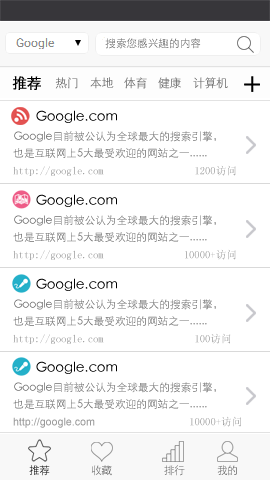
<style>
.page{position:relative;width:270px;height:480px;background:#ffffff}
.page>*{position:absolute;margin:0}
.t1{font:10.7px "STXihei";color:#676767}
.t2{font:14.7px "STXihei";letter-spacing:-0.04em;color:#000000;font-weight:bold}
.t3{font:12px "STXihei";letter-spacing:-0.04em;color:#676767}
.t4{font:12px "STXihei";letter-spacing:-0.04em}
.t5{font:13.3px "STXihei";color:#000000}
.t6{font:10.7px/16.9px "STXihei";color:#6e6e6e}
.t7{font:10.7px "SimSun";color:#9b9b9b}
.t8{font:10.7px "ArialMT";color:#9b9b9b}
.t9{font:10.7px "STXihei";letter-spacing:-0.04em}
.t10{font:10.7px "STXihei";letter-spacing:-0.04em;color:#676767}
</style>
<div class="page">
<p class="t1" style="left:105px;top:38px;width:96px;height:11px">搜索您感兴趣的内容</p>
<p class="t2" style="left:12px;top:76px;width:29px;height:14px">推荐</p>
<p class="t3" style="left:55px;top:77px;width:23px;height:12px">热门</p>
<p class="t3" style="left:90px;top:77px;width:24px;height:12px">本地</p>
<p class="t3" style="left:124px;top:77px;width:23px;height:12px">体育</p>
<p class="t3" style="left:158px;top:77px;width:23px;height:12px">健康</p>
<p class="t4" style="left:193px;top:77px;width:35px;height:12px">计算机</p>
<p class="t5" style="left:36px;top:110px;width:81px;height:13px">Google.com</p>
<p class="t6" style="left:13px;top:131px;width:203px;height:27px">Google目前被公认为全球最大的搜索引擎，<br>也是互联网上5大最受欢迎的网站之一......</p>
<p class="t7" style="left:13px;top:165px;width:223px;height:11px">http://google.com                 1200访问</p>
<p class="t5" style="left:36px;top:194px;width:81px;height:13px">Google.com</p>
<p class="t6" style="left:13px;top:215px;width:203px;height:27px">Google目前被公认为全球最大的搜索引擎，<br>也是互联网上5大最受欢迎的网站之一......</p>
<p class="t7" style="left:13px;top:249px;width:223px;height:11px">http://google.com               10000+访问</p>
<p class="t5" style="left:36px;top:278px;width:81px;height:13px">Google.com</p>
<p class="t6" style="left:13px;top:299px;width:203px;height:27px">Google目前被公认为全球最大的搜索引擎，<br>也是互联网上5大最受欢迎的网站之一......</p>
<p class="t7" style="left:13px;top:333px;width:218px;height:11px">http://google.com                 100访问</p>
<p class="t5" style="left:36px;top:361px;width:81px;height:13px">Google.com</p>
<p class="t6" style="left:13px;top:382px;width:203px;height:27px">Google目前被公认为全球最大的搜索引擎，<br>也是互联网上5大最受欢迎的网站之一......</p>
<p class="t8" style="left:13px;top:416px;width:228px;height:12px">http://google.com   <span class="t7">                10000+访问</span></p>
<p class="t9" style="left:29px;top:465px;width:21px;height:11px">推荐</p>
<p class="t10" style="left:91px;top:465px;width:21px;height:11px">收藏</p>
<p class="t9" style="left:164px;top:465px;width:21px;height:11px">排行</p>
<p class="t9" style="left:217px;top:465px;width:20px;height:11px">我的</p>
</div>
